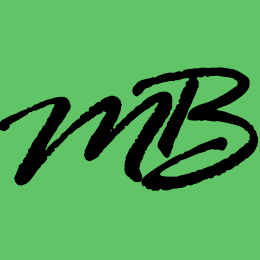
<style>
.page{position:relative;width:260px;height:260px;background:#61c567}
.page>*{position:absolute;margin:0}
.t1{font:208.6px "RageItalic";color:#000000}
.t2{font:183.5px "RageItalic";color:#000000}
</style>
<div class="page">
<p class="t1" style="left:132px;top:67px;width:126px;height:124px">B</p>
<p class="t2" style="left:0px;top:91px;width:173px;height:95px;rotate:2deg">M</p>
</div>
